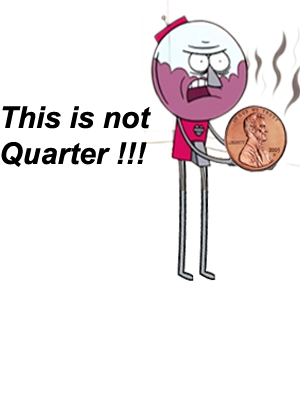
<style>
.page{position:relative;width:300px;height:400px;background:#ffffff}
.page>*{position:absolute;margin:0}
.t1{font:30px "Arial-BoldItalicMT";color:#000001}
</style>
<div class="page">
<p class="t1" style="left:1px;top:106px;width:150px;height:61px">This is not <br>Quarter !!!</p>
</div>
